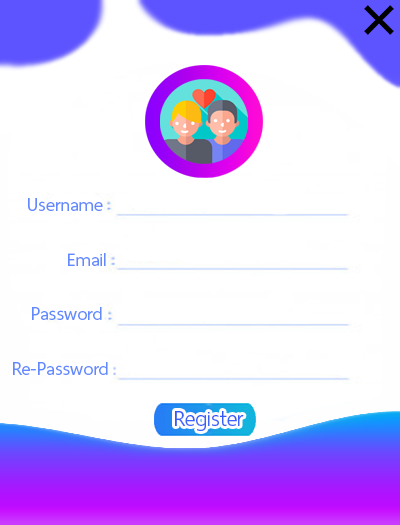
<style>
.page{position:relative;width:400px;height:525px;background:#ffffff}
.page>*{position:absolute;margin:0}
.t1{font:25px "ThaiSansNeue-Regular";color:#6289fd}
.t2{font:29.2px "ThaiSansNeue-Regular";color:#3960fd}
</style>
<div class="page">
<p class="t1" style="left:28px;top:198px;width:75px;height:13px">Username</p>
<p class="t1" style="left:68px;top:253px;width:38px;height:13px">Email</p>
<p class="t1" style="left:32px;top:307px;width:70px;height:13px">Password</p>
<p class="t1" style="left:13px;top:362px;width:95px;height:13px">Re-Password</p>
<p class="t2" style="left:175px;top:411px;width:69px;height:20px">Register</p>
</div>
